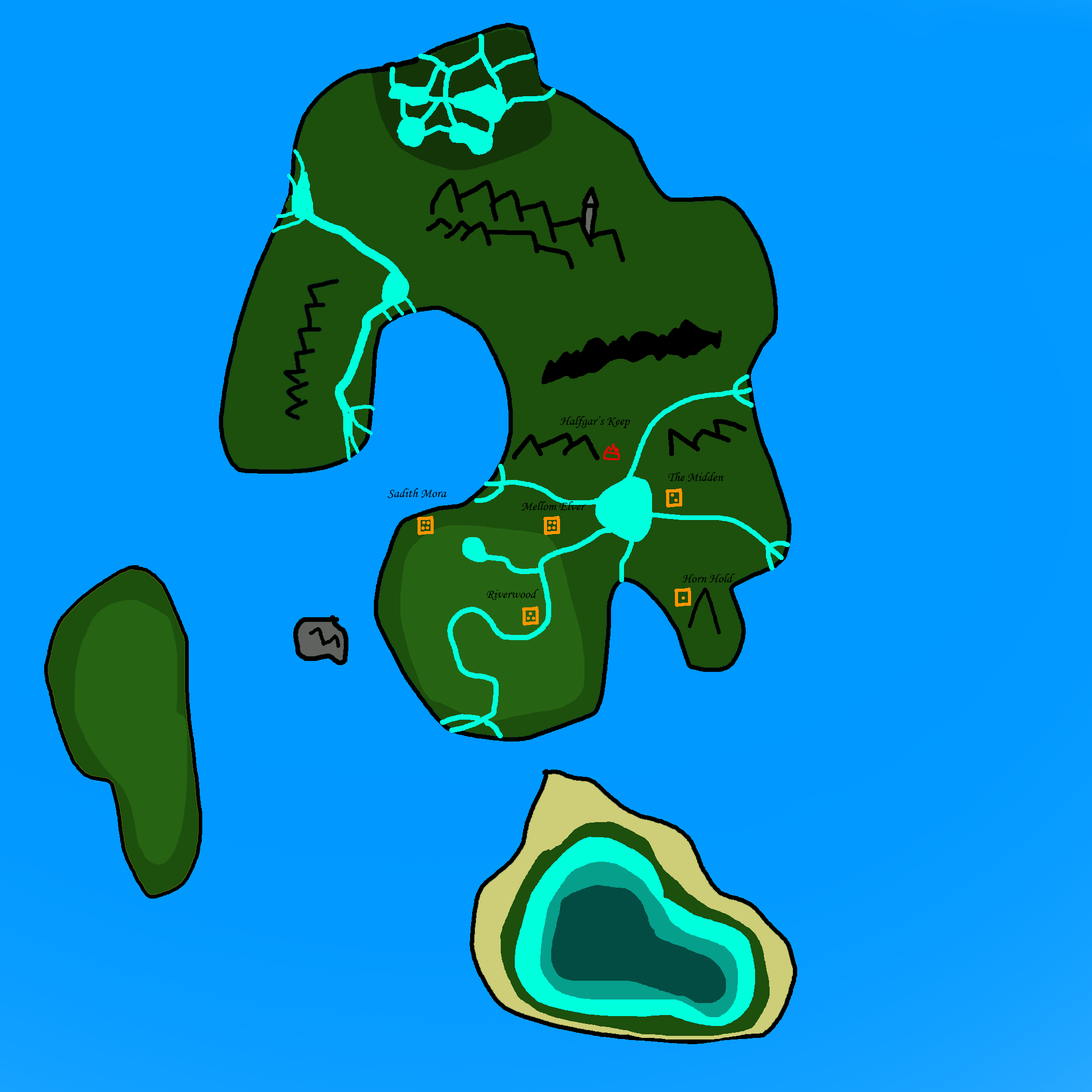
<style>
.page{position:relative;width:1092px;height:1092px;background:#0099ff}
.page>*{position:absolute;margin:0}
.t1{font:13px "MonotypeCorsiva";color:#000000}
</style>
<div class="page">
<p class="t1" style="left:560px;top:416px;width:70px;height:12px">Halfgar’s Keep</p>
<p class="t1" style="left:668px;top:472px;width:56px;height:10px">The Midden</p>
<p class="t1" style="left:387px;top:488px;width:60px;height:10px">Sadith Mora</p>
<p class="t1" style="left:522px;top:501px;width:64px;height:10px">Mellom Elver</p>
<p class="t1" style="left:682px;top:574px;width:53px;height:8px">Horn Hold</p>
<p class="t1" style="left:487px;top:589px;width:52px;height:11px">Riverwood</p>
</div>
